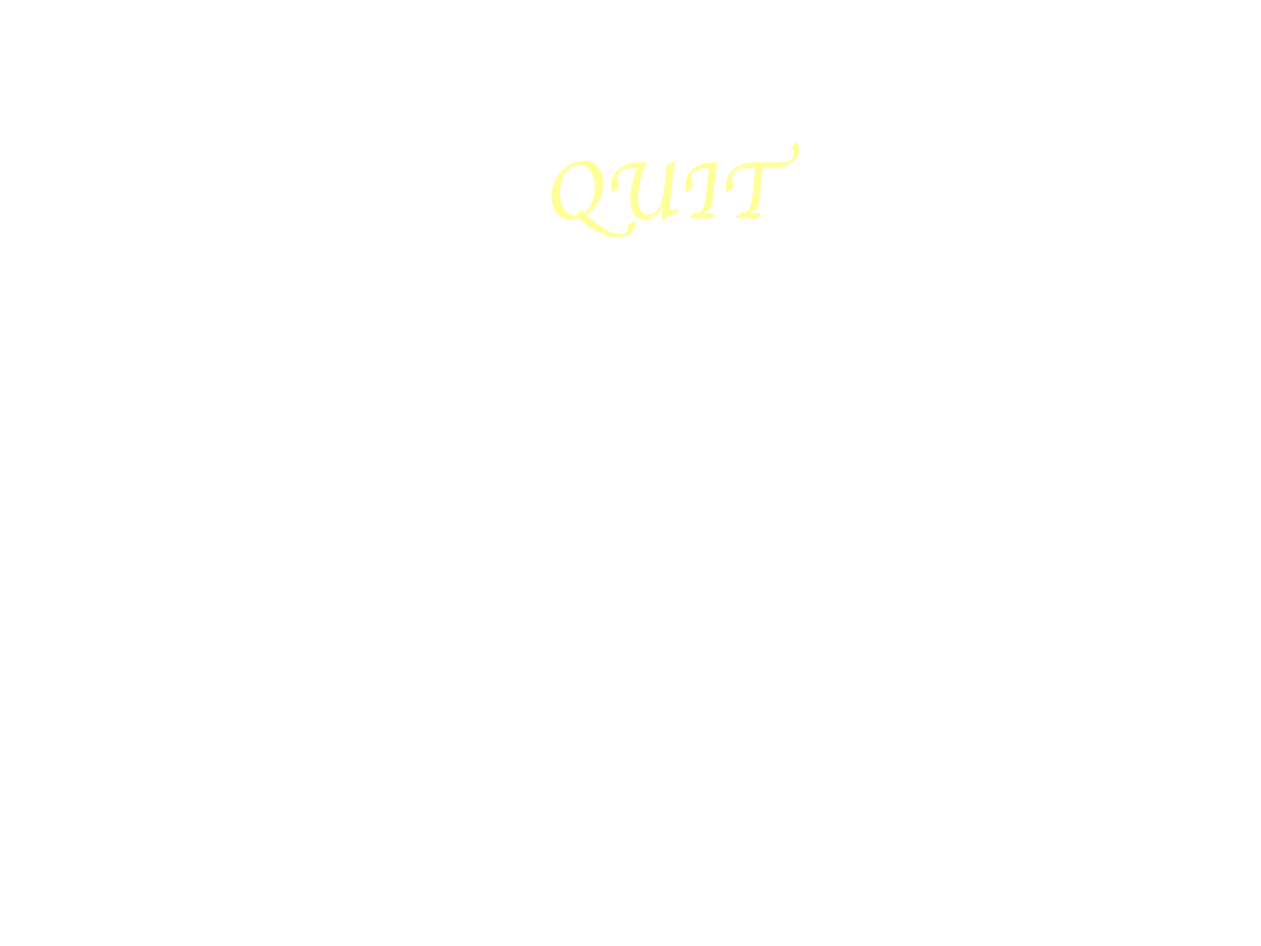
<style>
.page{position:relative;width:1261px;height:946px;background:#ffffff}
.page>*{position:absolute;margin:0}
.t1{font:83.4px "Apple-Chancery";letter-spacing:0.005em;color:#ffff99;font-weight:bold}
</style>
<div class="page">
<p class="t1" style="left:551px;top:142px;width:248px;height:96px">QUIT</p>
</div>
